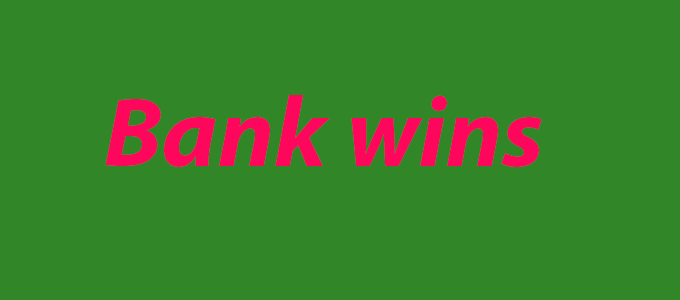
<style>
.page{position:relative;width:680px;height:300px;background:#318727}
.page>*{position:absolute;margin:0}
.t1{font:100px "MyriadPro-BoldIt";color:#fd075d}
</style>
<div class="page">
<p class="t1" style="left:105px;top:95px;width:437px;height:72px">Bank wins</p>
</div>
